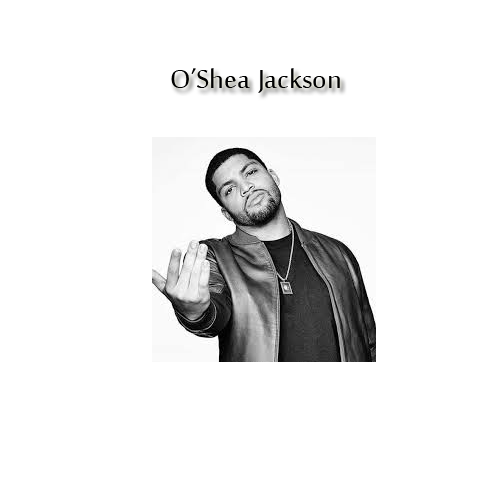
<style>
.page{position:relative;width:500px;height:500px;background:#ffffff}
.page>*{position:absolute;margin:0}
.t1{font:36px "SakkalMajalla";color:#000000}
</style>
<div class="page">
<p class="t1" style="left:171px;top:68px;width:169px;height:25px">O’Shea Jackson</p>
</div>
